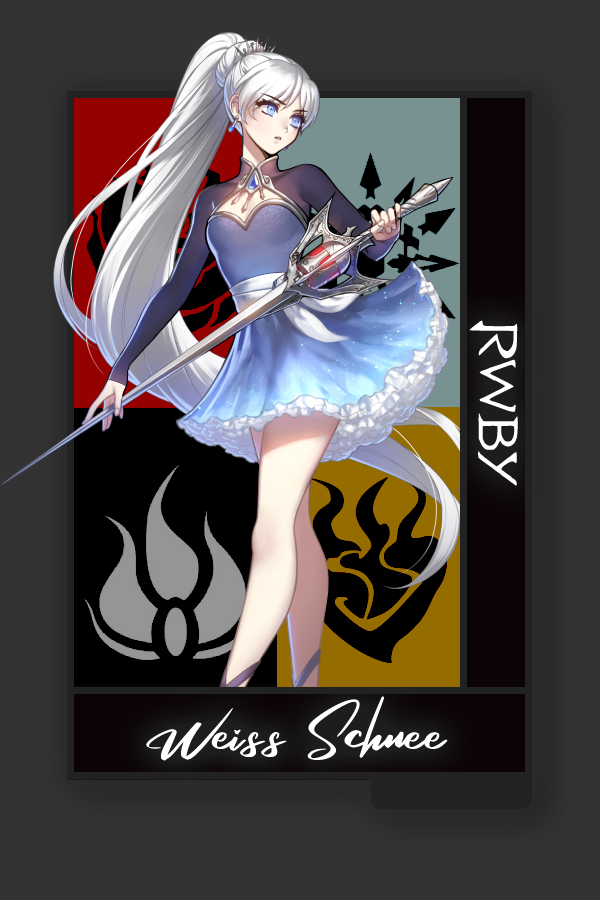
<style>
.page{position:relative;width:600px;height:900px;background:#333333}
.page>*{position:absolute;margin:0}
.t1{font:61.3px "RWBY_Style";color:#ffffff;scale:1.25 1}
.t2{font:76.6px "RosegaFREE";color:#ffffff;scale:0.91 1}
</style>
<div class="page">
<p class="t1" style="left:469px;top:320px;width:49px;height:166px;rotate:90deg">RWBY</p>
<p class="t2" style="left:145px;top:684px;width:303px;height:80px">Weiss Schnee</p>
</div>
